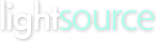
<style>
.page{position:relative;width:156px;height:42px;background:#ffffff}
.page>*{position:absolute;margin:0}
.t1{font:36px "KozGoPro-Light";letter-spacing:-0.05em;color:#aeffed}
.t2{font:36px "Station-Medium";letter-spacing:-0.05em;color:#ffffff}
</style>
<div class="page">
<p class="t1" style="left:0px;top:0px;width:154px;height:39px"><span class="t2">light</span>source</p>
</div>
